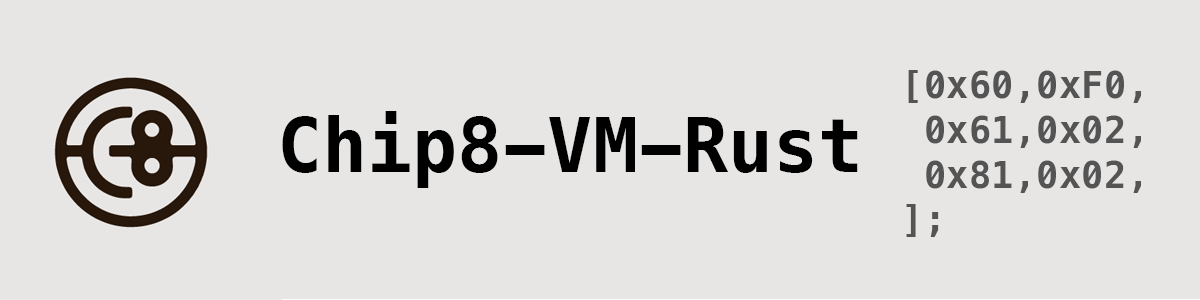
<style>
.page{position:relative;width:1200px;height:300px;background:#e7e6e5}
.page>*{position:absolute;margin:0}
.t1{font:37.4px "MesloLGMNF-Bold";color:#545454}
.t2{font:75px "MesloLGMNF-Bold";color:#000000}
</style>
<div class="page">
<p class="t1" style="left:906px;top:70px;width:235px;height:167px">[0x60,0xF0,<br> 0x61,0x02,<br> 0x81,0x02,<br>];</p>
<p class="t2" style="left:282px;top:111px;width:576px;height:77px">Chip8-VM-Rust</p>
</div>
